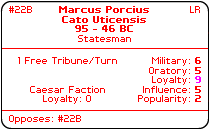
<style>
.page{position:relative;width:210px;height:130px;background:#ffffff}
.page>*{position:absolute;margin:0}
.t1{font:8px "PFTempestaSeven";color:#ff0000}
.t2{font:8px "PFTempestaSeven-Bold";color:#ff0000}
.t3{font:8px "PFTempestaSeven";color:#fe0000}
.t4{font:8px "PFTempestaSeven-Bold";color:#ff00ff}
</style>
<div class="page">
<p class="t1" style="left:9px;top:6px;width:23px;height:7px">#22B</p>
<p class="t2" style="left:59px;top:6px;width:90px;height:26px;text-align:center">Marcus Porcius<br>Cato Uticensis<br>95 - 46 BC</p>
<p class="t1" style="left:190px;top:6px;width:10px;height:7px">LR</p>
<p class="t3" style="left:78px;top:35px;width:53px;height:7px">Statesman</p>
<p class="t1" style="left:18px;top:57px;width:99px;height:47px;text-align:center">1 Free Tribune/Turn<br><br><br>Caesar Faction<br>Loyalty: 0</p>
<p class="t1" style="left:138px;top:57px;width:63px;height:47px;text-align:right">Military: <span class="t2">6<br></span>Oratory: <span class="t2">5<br></span>Loyalty: <span class="t4">9<br></span>Influence: <span class="t2">5<br></span>Popularity: <span class="t2">2</span></p>
<p class="t1" style="left:9px;top:115px;width:72px;height:9px">Opposes: #22B</p>
</div>
